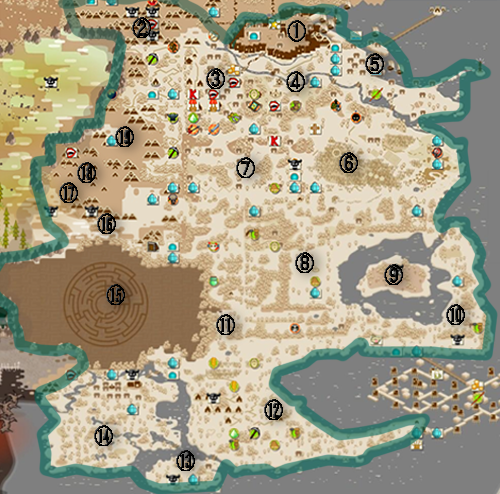
<style>
.page{position:relative;width:500px;height:494px}
.page>*{position:absolute;margin:0}
.t1{font:21px "MS-Gothic";color:#000000;font-weight:bold;scale:0.87 1}
</style>
<div class="page">
<p class="t1" style="left:132px;top:17px;width:19px;height:21px">②</p>
<p class="t1" style="left:287px;top:20px;width:19px;height:22px">①</p>
<p class="t1" style="left:365px;top:53px;width:19px;height:21px">⑤</p>
<p class="t1" style="left:206px;top:68px;width:19px;height:21px">③</p>
<p class="t1" style="left:286px;top:71px;width:19px;height:21px">④</p>
<p class="t1" style="left:115px;top:126px;width:19px;height:21px">⑲</p>
<p class="t1" style="left:236px;top:157px;width:19px;height:21px">⑦</p>
<p class="t1" style="left:339px;top:152px;width:19px;height:21px">⑥</p>
<p class="t1" style="left:77px;top:162px;width:19px;height:21px">⑱</p>
<p class="t1" style="left:59px;top:182px;width:19px;height:21px">⑰</p>
<p class="t1" style="left:97px;top:213px;width:19px;height:21px">⑯</p>
<p class="t1" style="left:295px;top:252px;width:19px;height:21px">⑧</p>
<p class="t1" style="left:384px;top:264px;width:19px;height:21px">⑨</p>
<p class="t1" style="left:106px;top:284px;width:19px;height:21px">⑮</p>
<p class="t1" style="left:446px;top:304px;width:19px;height:21px">⑩</p>
<p class="t1" style="left:216px;top:314px;width:19px;height:21px">⑪</p>
<p class="t1" style="left:264px;top:399px;width:19px;height:21px">⑫</p>
<p class="t1" style="left:94px;top:425px;width:19px;height:21px">⑭</p>
<p class="t1" style="left:176px;top:450px;width:19px;height:21px">⑬</p>
</div>
